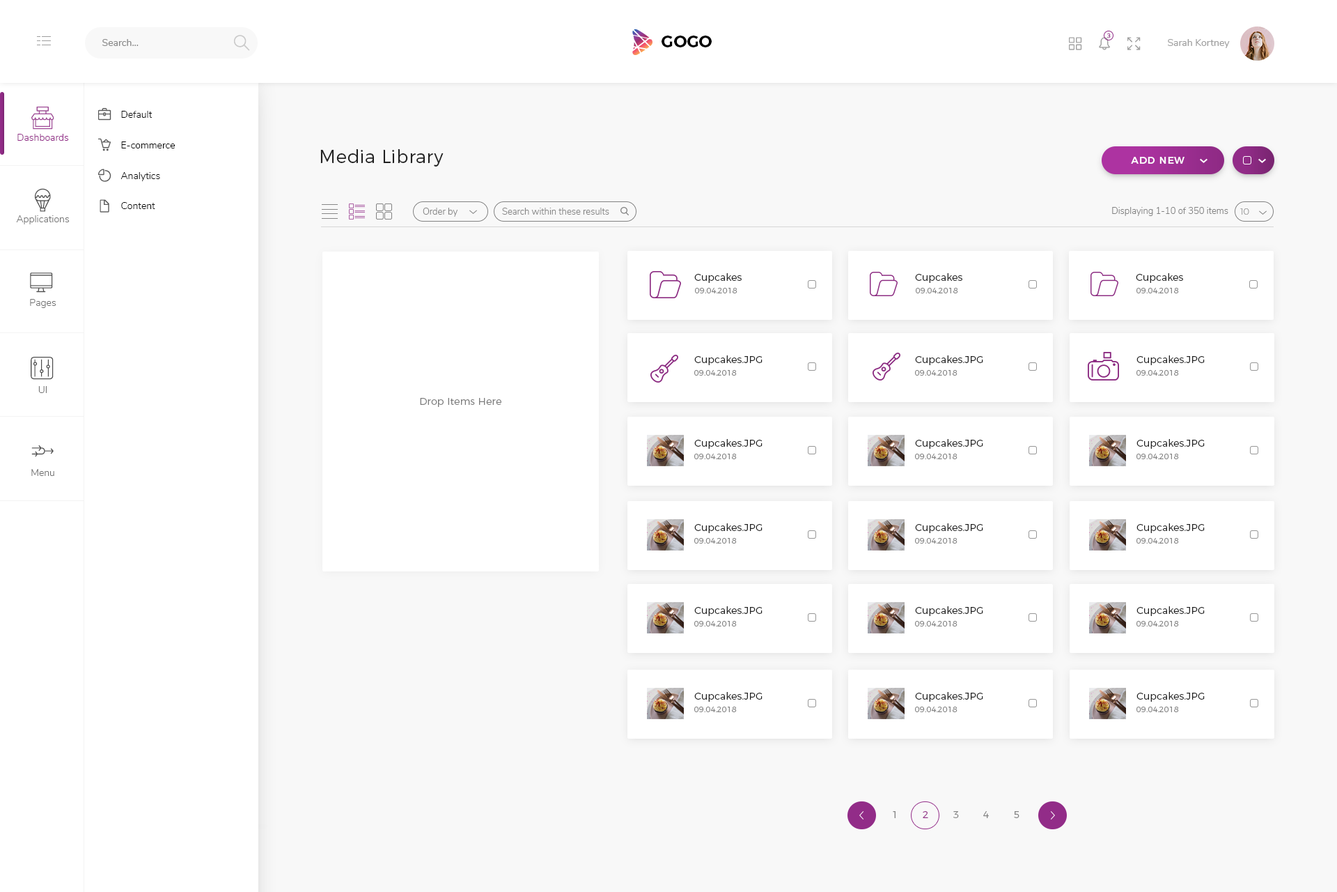
<style>
.page{position:relative;width:1337px;height:892px;background:#ffffff}
.page>*{position:absolute;margin:0}
.t1{font:9.8px "Nunito-Regular";color:#898989}
.t2{font:16.7px "Montserrat-SemiBold";color:#000000}
.t3{font:6.3px "Nunito-Regular";letter-spacing:0.02em;color:#98418f}
.t4{font:9.8px "Nunito-Regular";color:#a0a0a0}
.t5{font:9.8px "Nunito-Light";color:#000000}
.t6{font:9.8px "Nunito-Light";color:#922c88}
.t7{font:18.1px "Montserrat-Light";letter-spacing:0.02em;color:#212121}
.t8{font:9.8px "Montserrat-Medium";letter-spacing:0.06em;color:#ffffff}
.t9{font:9.1px "Nunito-Light";color:#828282}
.t10{font:9.1px "Montserrat-Light"}
.t11{font:9.8px "Nunito-Light";color:#737373}
.t12{font:9.8px "Montserrat-Light";letter-spacing:0.02em;color:#212121}
.t13{font:7.7px "Montserrat-Light";letter-spacing:0.02em;color:#858585}
.t14{font:9.8px "Montserrat-Light";letter-spacing:0.02em;color:#7c7c7c}
.t15{font:9.8px "Montserrat-Light";letter-spacing:0.02em;color:#858585}
.t16{font:9.8px "Montserrat-Light";letter-spacing:0.02em;color:#95328b}
</style>
<div class="page">
<p class="t1" style="left:102px;top:39px;width:37px;height:7px">Search...</p>
<p class="t2" style="left:662px;top:36px;width:50px;height:11px">GOGO</p>
<p class="t3" style="left:1108px;top:33px;width:3px;height:5px">3</p>
<p class="t4" style="left:1168px;top:39px;width:62px;height:9px">Sarah Kortney</p>
<p class="t5" style="left:121px;top:111px;width:32px;height:7px">Default</p>
<p class="t6" style="left:17px;top:134px;width:52px;height:7px">Dashboards</p>
<p class="t5" style="left:121px;top:141px;width:55px;height:7px">E-commerce</p>
<p class="t7" style="left:320px;top:149px;width:124px;height:17px">Media Library</p>
<p class="t8" style="left:1131px;top:157px;width:54px;height:7px">ADD NEW</p>
<p class="t5" style="left:121px;top:172px;width:39px;height:9px">Analytics</p>
<p class="t5" style="left:121px;top:202px;width:34px;height:7px">Content</p>
<p class="t9" style="left:423px;top:208px;width:35px;height:9px">Order by</p>
<p class="t9" style="left:502px;top:208px;width:107px;height:7px">Search within these results</p>
<p class="t9" style="left:1112px;top:207px;width:117px;height:9px">Displaying 1-10 of 350 items</p>
<p class="t10" style="left:1241px;top:208px;width:9px;height:7px">10</p>
<p class="t11" style="left:16px;top:215px;width:54px;height:9px">Applications</p>
<p class="t12" style="left:694px;top:273px;width:48px;height:10px">Cupcakes</p>
<p class="t12" style="left:915px;top:273px;width:48px;height:10px">Cupcakes</p>
<p class="t12" style="left:1136px;top:273px;width:47px;height:10px">Cupcakes</p>
<p class="t13" style="left:695px;top:288px;width:43px;height:5px">09.04.2018</p>
<p class="t13" style="left:916px;top:288px;width:42px;height:5px">09.04.2018</p>
<p class="t13" style="left:1137px;top:288px;width:42px;height:5px">09.04.2018</p>
<p class="t11" style="left:30px;top:299px;width:26px;height:9px">Pages</p>
<p class="t12" style="left:694px;top:355px;width:69px;height:10px">Cupcakes.JPG</p>
<p class="t12" style="left:915px;top:355px;width:69px;height:10px">Cupcakes.JPG</p>
<p class="t12" style="left:1137px;top:355px;width:68px;height:10px">Cupcakes.JPG</p>
<p class="t13" style="left:694px;top:370px;width:43px;height:5px">09.04.2018</p>
<p class="t13" style="left:915px;top:370px;width:43px;height:5px">09.04.2018</p>
<p class="t13" style="left:1137px;top:370px;width:42px;height:5px">09.04.2018</p>
<p class="t11" style="left:38px;top:386px;width:9px;height:7px">UI</p>
<p class="t14" style="left:420px;top:398px;width:82px;height:9px">Drop Items Here</p>
<p class="t12" style="left:694px;top:439px;width:69px;height:10px">Cupcakes.JPG</p>
<p class="t12" style="left:915px;top:439px;width:69px;height:10px">Cupcakes.JPG</p>
<p class="t12" style="left:1137px;top:439px;width:68px;height:10px">Cupcakes.JPG</p>
<p class="t13" style="left:694px;top:453px;width:43px;height:6px">09.04.2018</p>
<p class="t13" style="left:915px;top:453px;width:43px;height:6px">09.04.2018</p>
<p class="t13" style="left:1137px;top:453px;width:42px;height:6px">09.04.2018</p>
<p class="t11" style="left:31px;top:469px;width:23px;height:7px">Menu</p>
<p class="t12" style="left:694px;top:523px;width:69px;height:10px">Cupcakes.JPG</p>
<p class="t12" style="left:915px;top:523px;width:69px;height:10px">Cupcakes.JPG</p>
<p class="t12" style="left:1137px;top:523px;width:68px;height:10px">Cupcakes.JPG</p>
<p class="t13" style="left:694px;top:538px;width:43px;height:5px">09.04.2018</p>
<p class="t13" style="left:915px;top:538px;width:43px;height:5px">09.04.2018</p>
<p class="t13" style="left:1137px;top:538px;width:42px;height:5px">09.04.2018</p>
<p class="t12" style="left:694px;top:606px;width:69px;height:10px">Cupcakes.JPG</p>
<p class="t12" style="left:915px;top:606px;width:69px;height:10px">Cupcakes.JPG</p>
<p class="t12" style="left:1137px;top:606px;width:68px;height:10px">Cupcakes.JPG</p>
<p class="t13" style="left:694px;top:621px;width:43px;height:5px">09.04.2018</p>
<p class="t13" style="left:915px;top:621px;width:43px;height:5px">09.04.2018</p>
<p class="t13" style="left:1137px;top:621px;width:42px;height:5px">09.04.2018</p>
<p class="t12" style="left:694px;top:692px;width:69px;height:9px">Cupcakes.JPG</p>
<p class="t12" style="left:915px;top:692px;width:69px;height:9px">Cupcakes.JPG</p>
<p class="t12" style="left:1137px;top:692px;width:68px;height:9px">Cupcakes.JPG</p>
<p class="t13" style="left:694px;top:706px;width:43px;height:6px">09.04.2018</p>
<p class="t13" style="left:915px;top:706px;width:43px;height:6px">09.04.2018</p>
<p class="t13" style="left:1137px;top:706px;width:42px;height:6px">09.04.2018</p>
<p class="t15" style="left:893px;top:811px;width:3px;height:7px">1</p>
<p class="t16" style="left:923px;top:811px;width:6px;height:7px">2</p>
<p class="t15" style="left:954px;top:811px;width:5px;height:7px">3</p>
<p class="t15" style="left:984px;top:811px;width:5px;height:7px">4</p>
<p class="t15" style="left:1014px;top:811px;width:6px;height:7px">5</p>
</div>
